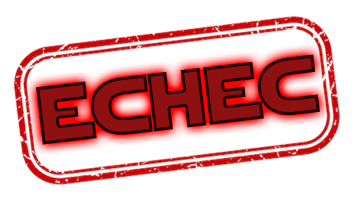
<style>
.page{position:relative;width:356px;height:200px;background:#ffffff}
.page>*{position:absolute;margin:0}
.t1{font:81.2px "StarJedi"}
</style>
<div class="page">
<p class="t1" style="left:36px;top:54px;width:284px;height:91px;rotate:-7deg">echec</p>
<p class="t1" style="left:36px;top:54px;width:284px;height:91px;rotate:-7deg">echec</p>
</div>
